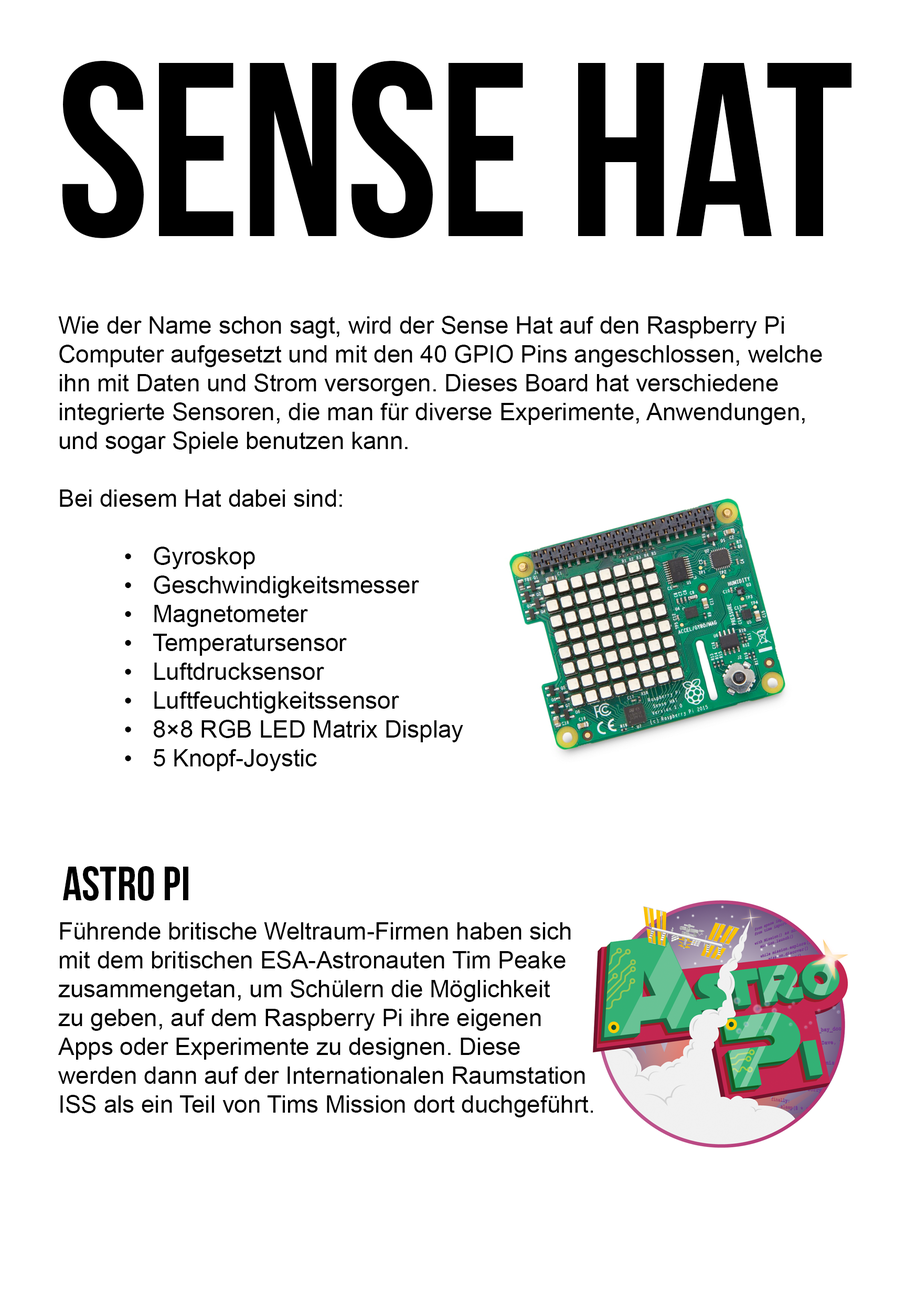
<style>
.page{position:relative;width:917px;height:1301px;background:#ffffff}
.page>*{position:absolute;margin:0}
.t1{font:247.2px "BebasNeue";color:#000000}
.t2{font:24px "ArialMT";color:#000000}
.t3{font:48.1px "BebasNeue";color:#000000}
</style>
<div class="page">
<p class="t1" style="left:62px;top:60px;width:790px;height:178px">SENSE HAT</p>
<p class="t2" style="left:58px;top:316px;width:764px;height:801px">Wie der Name schon sagt, wird der Sense Hat auf den Raspberry Pi Computer aufgesetzt und mit den 40 GPIO Pins angeschlossen, welche ihn mit Daten und Strom versorgen. Dieses Board hat verschiedene integrierte Sensoren, die man für diverse Experimente, Anwendungen, und sogar Spiele benutzen kann. <br><br>Bei diesem Hat dabei sind:<br><br>•  Gyroskop<br>•  Geschwindigkeitsmesser<br>•  Magnetometer<br>•  Temperatursensor<br>•  Luftdrucksensor<br>•  Luftfeuchtigkeitssensor<br>•  8×8 RGB LED Matrix Display<br>•  5 Knopf-Joystic<br><br><br><br><br><br>Führende britische Weltraum-Firmen haben sich<br>mit dem britischen ESA-Astronauten Tim Peake<br>zusammengetan, um Schülern die Möglichkeit<br>zu geben, auf dem Raspberry Pi ihre eigenen<br>Apps oder Experimente zu designen. Diese<br>werden dann auf der Internationalen Raumstation<br>ISS als ein Teil von Tims Mission dort duchgeführt.</p>
<p class="t3" style="left:63px;top:866px;width:125px;height:35px">Astro Pi</p>
</div>
